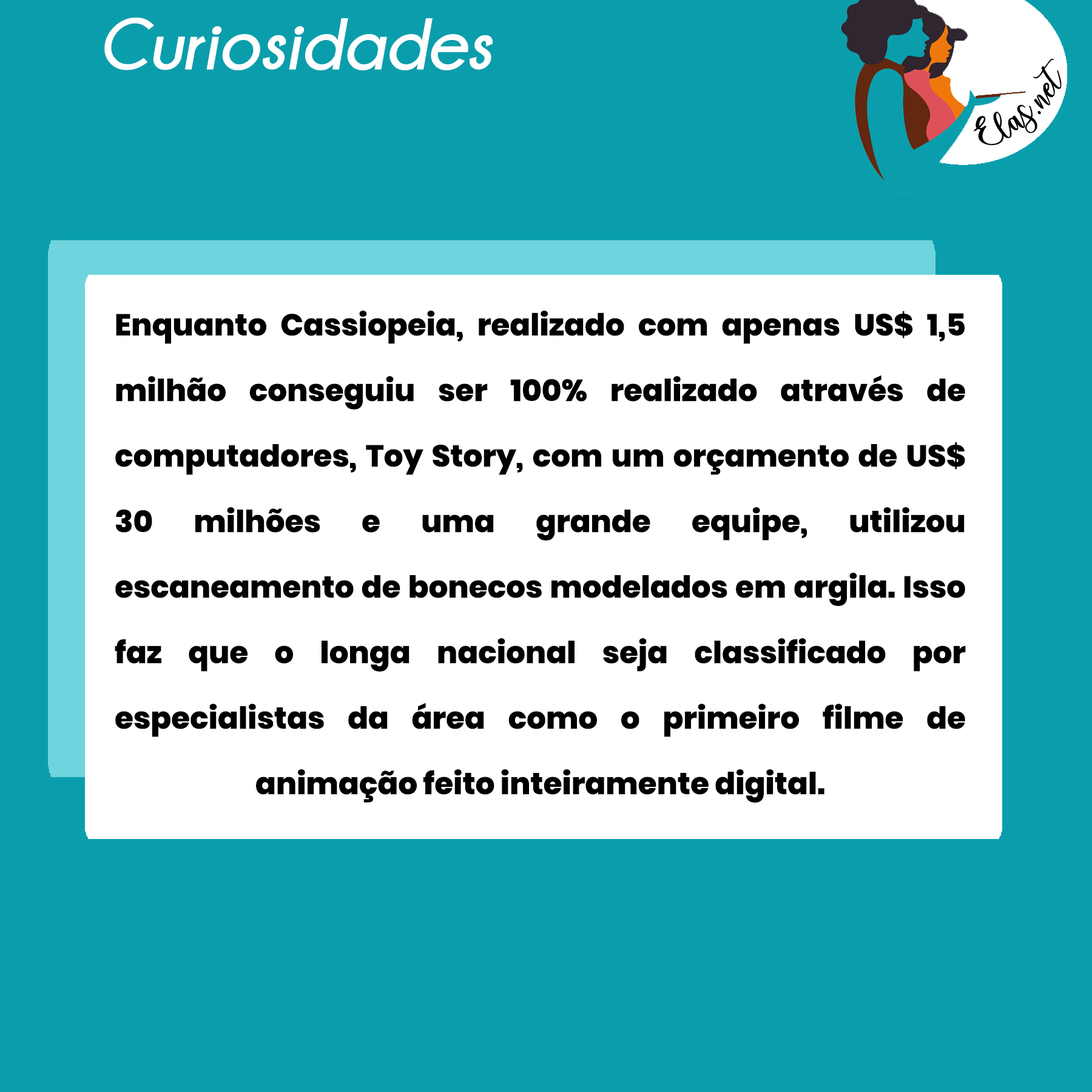
<style>
.page{position:relative;width:1092px;height:1092px;background:#0a9eac}
.page>*{position:absolute;margin:0}
.t1{font:72.8px "Champagne&Limousines-BoldItalic";color:#ffffff}
.t2{font:30.3px/65.5px "Poppins-ExtraBold";color:#000000}
</style>
<div class="page">
<p class="t1" style="left:104px;top:18px;width:389px;height:52px">Curiosidades</p>
<p class="t2" style="left:115px;top:311px;width:851px;height:492px;text-align:justify">Enquanto Cassiopeia, realizado com apenas US$ 1,5 milhão conseguiu ser 100% realizado através de computadores, Toy Story, com um orçamento de US$ 30 milhões e uma grande equipe, utilizou escaneamento de bonecos modelados em argila. Isso faz que o longa nacional seja classificado por especialistas da área como o primeiro filme de animação feito inteiramente digital.</p>
</div>
